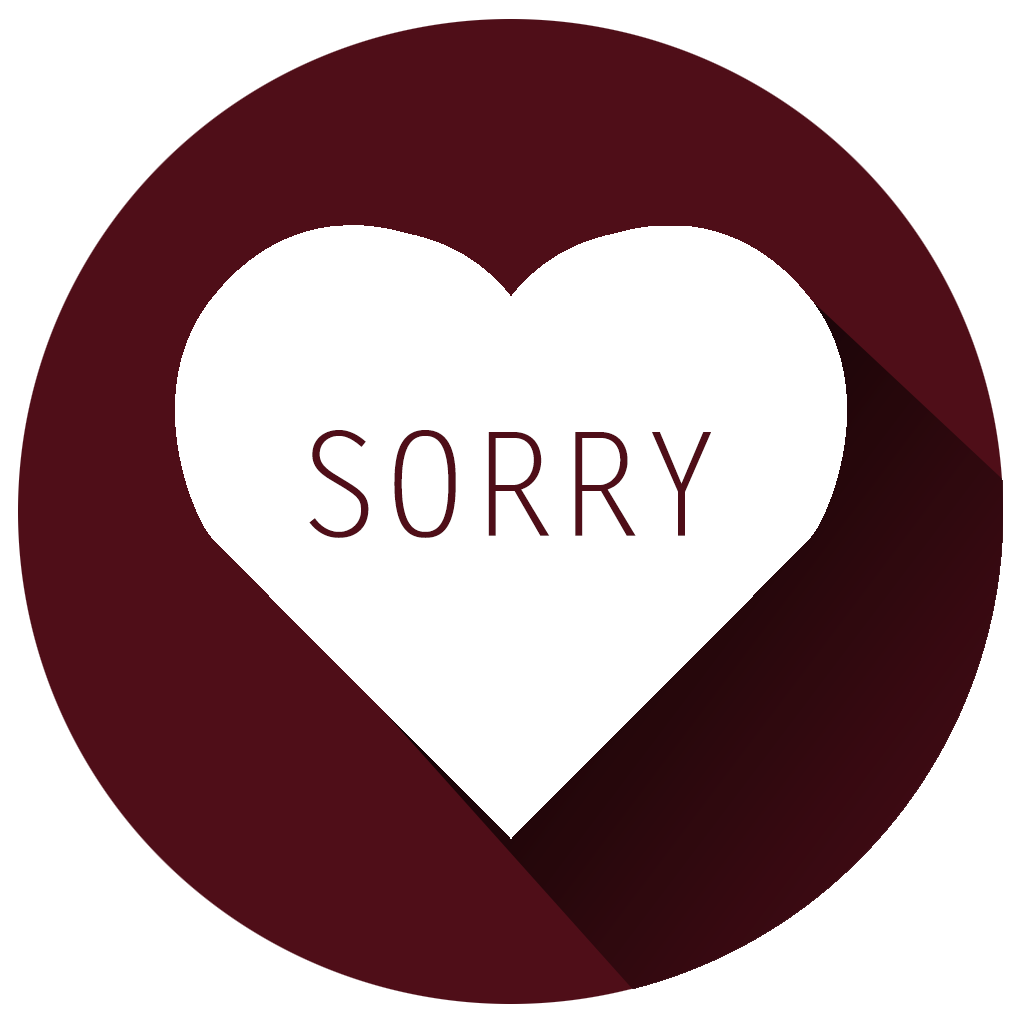
<style>
.page{position:relative;width:1024px;height:1024px;background:#ffffff}
.page>*{position:absolute;margin:0}
.t1{font:144px "LetterGothicStd";color:#4f0e18}
</style>
<div class="page">
<p class="t1" style="left:309px;top:430px;width:402px;height:108px">SORRY</p>
</div>
